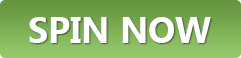
<style>
.page{position:relative;width:241px;height:58px}
.page>*{position:absolute;margin:0}
.t1{font:36px "SegoeUI-Bold";color:#ffffff}
</style>
<div class="page">
<p class="t1" style="left:29px;top:17px;width:182px;height:26px">SPIN NOW</p>
</div>
